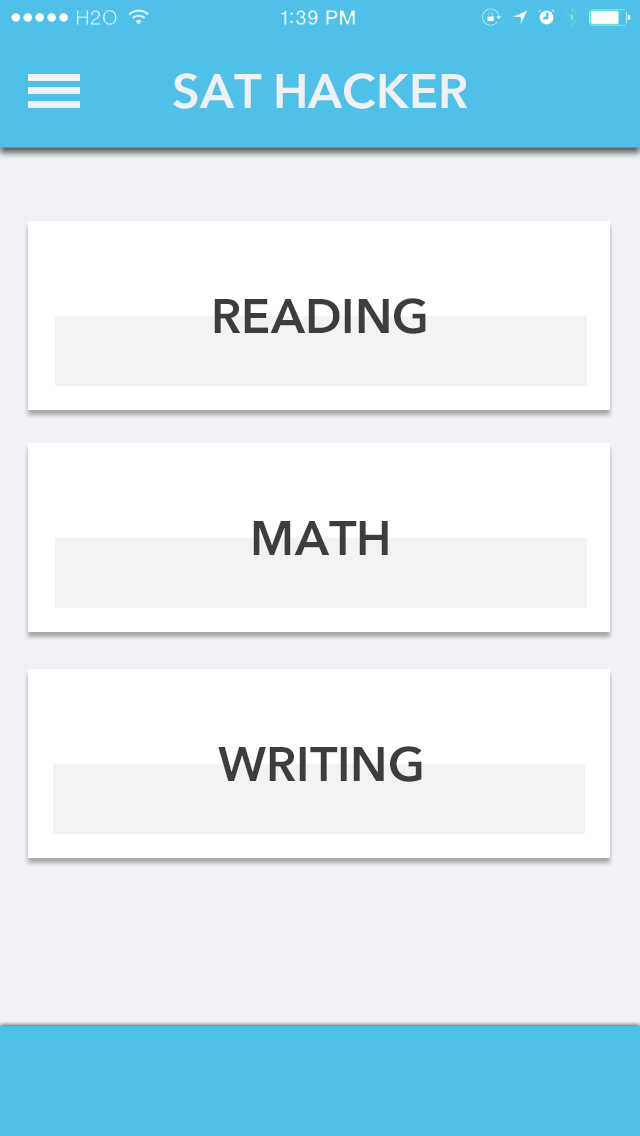
<style>
.page{position:relative;width:640px;height:1136px;background:#ffffff}
.page>*{position:absolute;margin:0}
.t1{font:48px "AvenirNext-DemiBold";color:#eff1f5;text-transform:uppercase}
.t2{font:48px "AvenirNext-DemiBold";color:#3d3d3d;text-transform:uppercase}
</style>
<div class="page">
<p class="t1" style="left:173px;top:73px;width:295px;height:36px">SAT HackER</p>
<p class="t2" style="left:214px;top:298px;width:212px;height:36px">Reading</p>
<p class="t2" style="left:253px;top:521px;width:135px;height:34px">Math</p>
<p class="t2" style="left:218px;top:746px;width:204px;height:36px">Writing</p>
</div>
